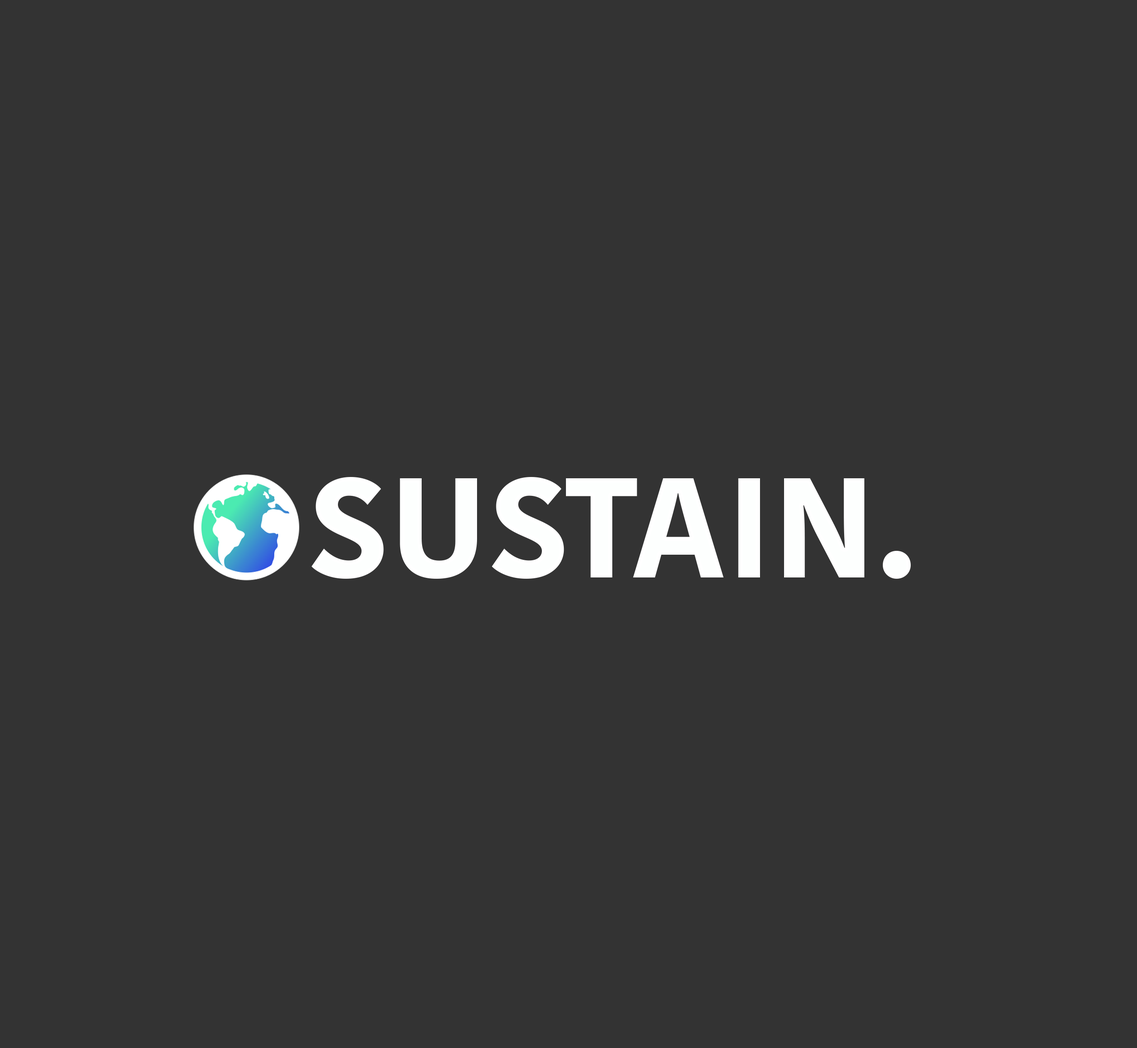
<style>
.page{position:relative;width:1137px;height:1048px;background:#333333}
.page>*{position:absolute;margin:0}
.t1{font:141.7px "KohinoorDevanagari-Bold";color:#fdfffe}
</style>
<div class="page">
<p class="t1" style="left:311px;top:477px;width:600px;height:102px">SUSTAIN.</p>
</div>
